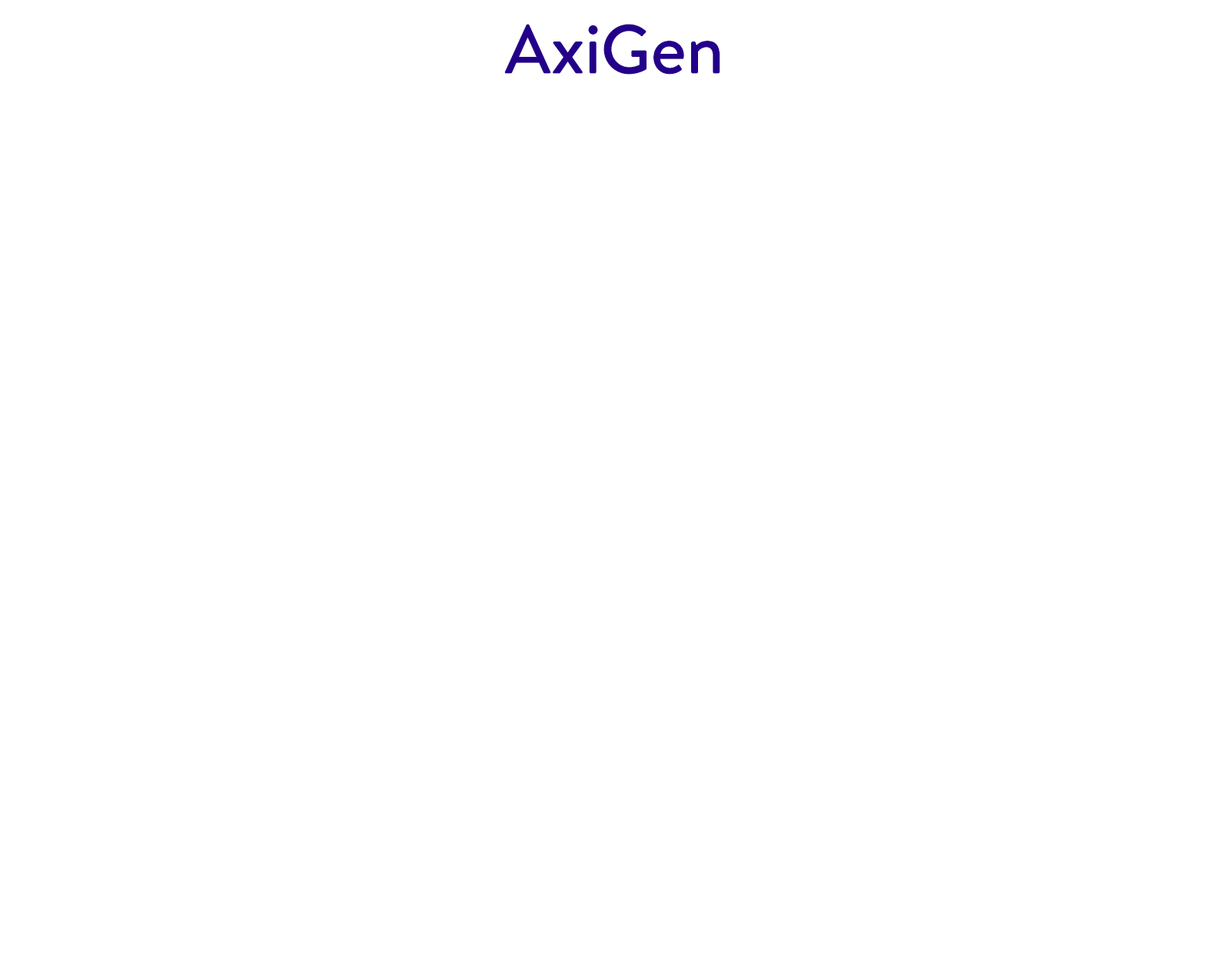
<style>
.page{position:relative;width:1230px;height:970px;background:#ffffff}
.page>*{position:absolute;margin:0}
.t1{font:69.2px "BrandonText-Medium";color:#24008a}
</style>
<div class="page">
<p class="t1" style="left:504px;top:24px;width:216px;height:51px">AxiGen</p>
</div>
